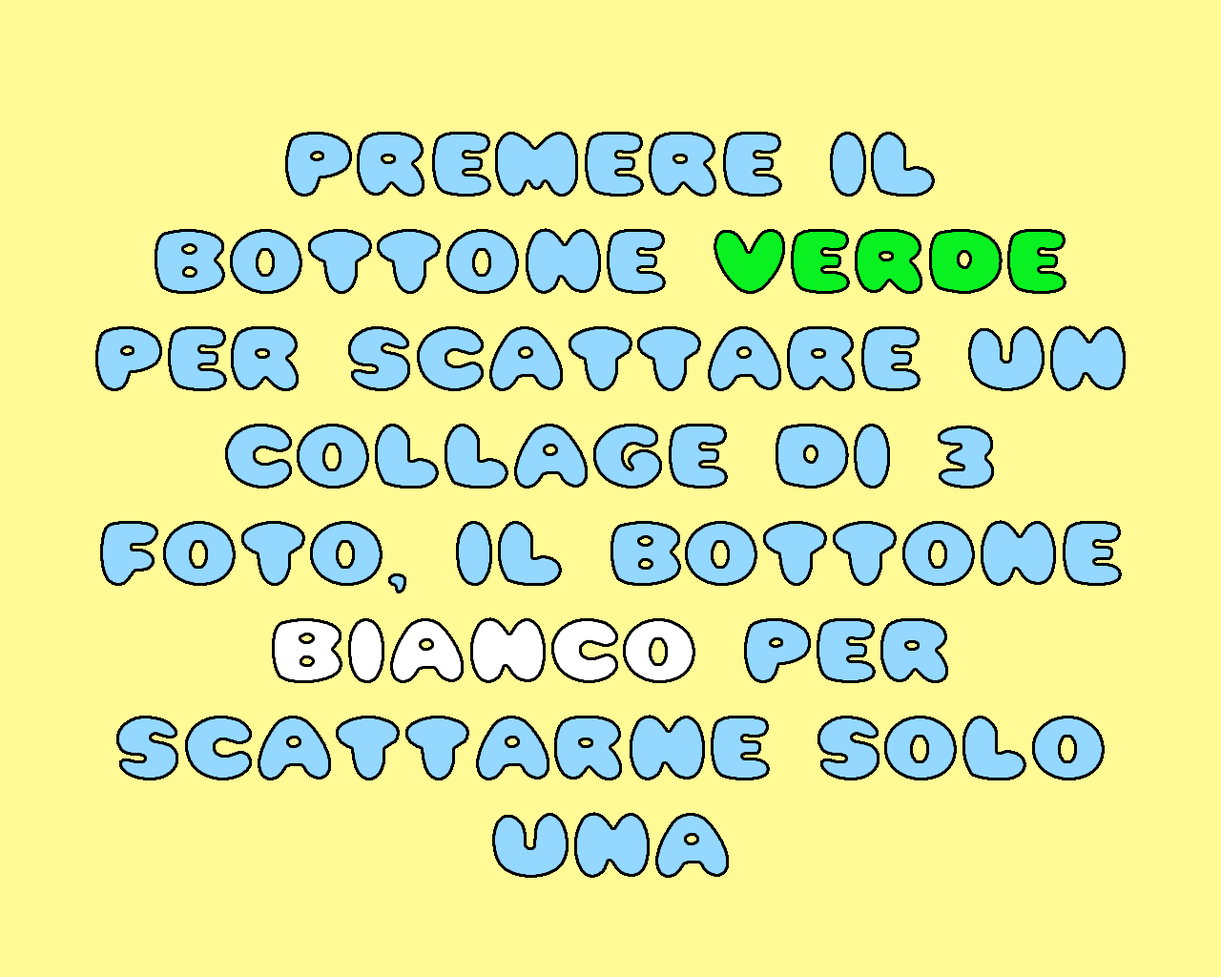
<style>
.page{position:relative;width:1221px;height:977px;background:#fffa95}
.page>*{position:absolute;margin:0}
.t1{font:81.1px "Pleasantly-Plump";letter-spacing:0.025em;color:#94d8ff}
.t2{font:81.1px "Pleasantly-Plump";letter-spacing:0.025em;color:#09f121}
.t3{font:81.1px "Pleasantly-Plump";letter-spacing:0.025em;color:#ffffff}
</style>
<div class="page">
<p class="t1" style="left:95px;top:132px;width:1030px;height:746px;text-align:center">Premere il <br>bottone <span class="t2">verde </span>per scattare un collage di 3 foto, il bottone <span class="t3">bianco </span>per <br>scattarne solo una</p>
</div>
